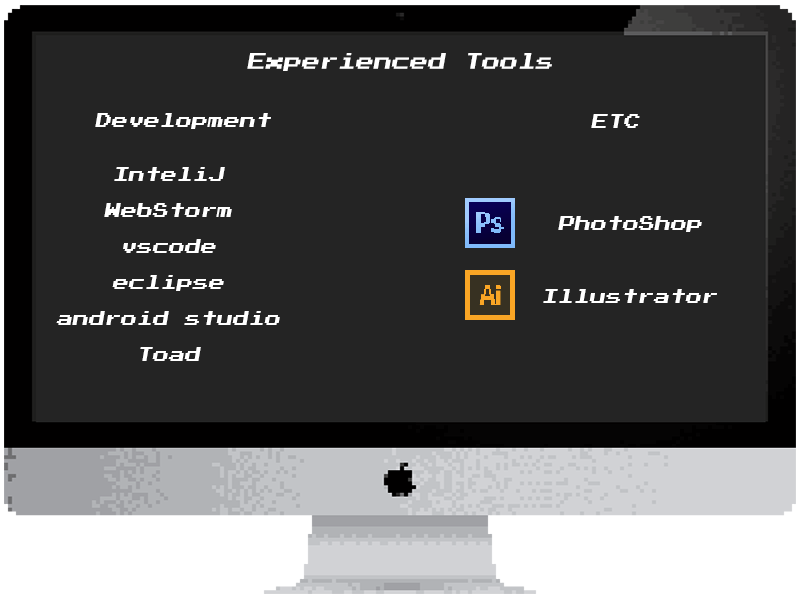
<style>
.page{position:relative;width:800px;height:600px;background:#242424}
.page>*{position:absolute;margin:0}
.t1{font:18px "PressStart2P";color:#ffffff;font-style:italic}
.t2{font:16px "PressStart2P";color:#ffffff;font-style:italic}
.t3{font:16px/36px "PressStart2P";color:#ffffff;font-style:italic}
</style>
<div class="page">
<p class="t1" style="left:247px;top:53px;width:305px;height:18px">Experienced Tools</p>
<p class="t2" style="left:95px;top:113px;width:176px;height:16px">Development</p>
<p class="t2" style="left:591px;top:114px;width:49px;height:14px">ETC</p>
<p class="t3" style="left:56px;top:167px;width:224px;height:194px;text-align:center">InteliJ<br>WebStorm<br>vscode<br>eclipse<br>android studio<br>Toad</p>
<p class="t2" style="left:558px;top:216px;width:144px;height:16px">PhotoShop</p>
<p class="t2" style="left:543px;top:289px;width:174px;height:14px">Illustrator</p>
</div>
